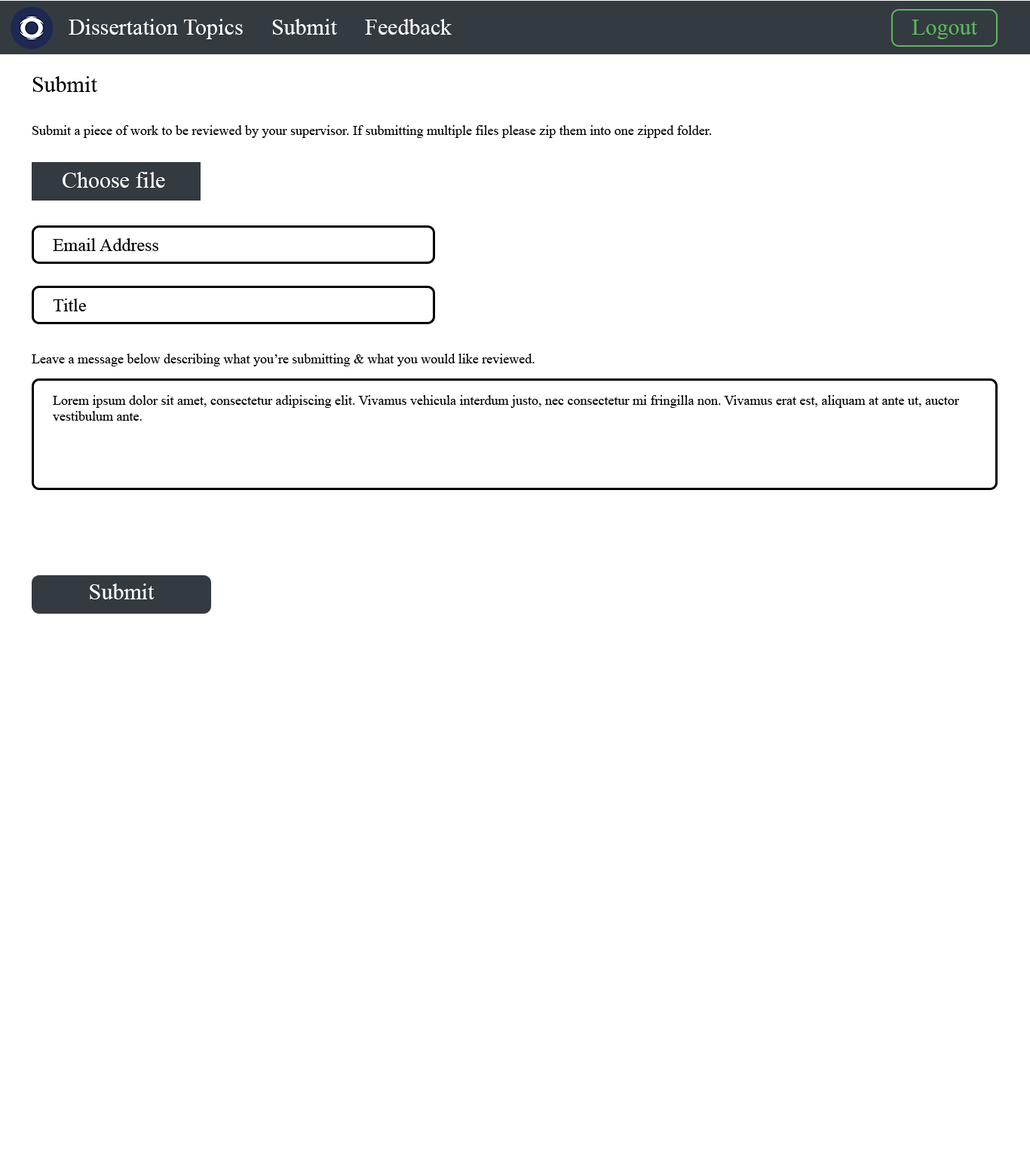
<style>
.page{position:relative;width:1030px;height:1158px;background:#ffffff}
.page>*{position:absolute;margin:0}
.t1{font:22.6px "TimesNewRomanPSMT";color:#ffffff}
.t2{font:22.6px "TimesNewRomanPSMT";color:#5cb85c}
.t3{font:13.6px "TimesNewRomanPSMT";color:#000000}
.t4{font:22.6px "TimesNewRomanPSMT";color:#000000}
.t5{font:18.1px "TimesNewRomanPSMT";color:#000000}
</style>
<div class="page">
<p class="t1" style="left:69px;top:19px;width:383px;height:20px">Dissertation Topics     Submit     Feedback</p>
<p class="t2" style="left:911px;top:20px;width:66px;height:19px">Logout</p>
<p class="t3" style="left:32px;top:76px;width:679px;height:290px"><span class="t4">Submit<br><br></span>Submit a piece of work to be reviewed by your supervisor. If submitting multiple files please zip them into one zipped folder. <br><br><br><br><br><br><br><br><br><br><br><br><br><br>Leave a message below describing what you’re submitting &amp; what you would like reviewed.</p>
<p class="t1" style="left:63px;top:172px;width:102px;height:16px">Choose file</p>
<p class="t5" style="left:53px;top:238px;width:105px;height:13px">Email Address</p>
<p class="t5" style="left:53px;top:299px;width:33px;height:12px">Title</p>
<p class="t3" style="left:53px;top:395px;width:906px;height:26px">Lorem ipsum dolor sit amet, consectetur adipiscing elit. Vivamus vehicula interdum justo, nec consectetur mi fringilla non. Vivamus erat est, aliquam at ante ut, auctor vestibulum ante.</p>
<p class="t1" style="left:90px;top:583px;width:65px;height:16px">Submit</p>
</div>
